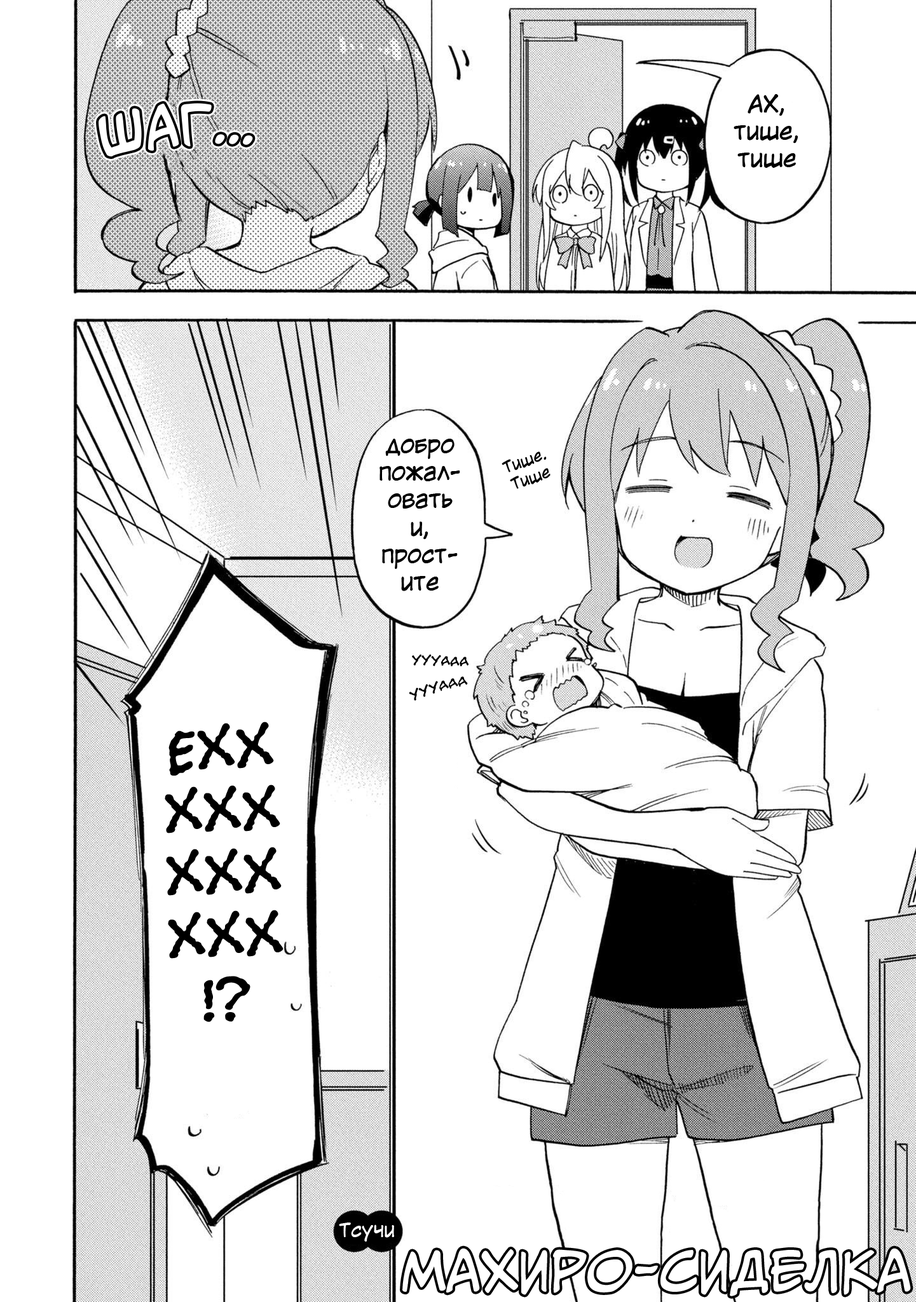
<style>
.page{position:relative;width:916px;height:1302px;background:#ffffff}
.page>*{position:absolute;margin:0}
.t1{font:22.9px "KuraiVoice2";color:#000000}
.t2{font:50.9px "CCMeanwhile";color:#ffffff}
.t3{font:15.3px "KuraiVoice2";color:#000000}
.t4{font:15.3px "el_CCEvilSchemes";color:#000000}
.t5{font:63.3px/62.7px "el_CCEvilSchemes";color:#000000}
.t6{font:19.1px "KuraiVoice2";color:#ffffff}
</style>
<div class="page">
<p class="t1" style="left:734px;top:94px;width:64px;height:74px;text-align:center">АХ,<br>тише,<br>тише</p>
<p class="t2" style="left:99px;top:103px;width:154px;height:54px;rotate:-5deg">ШАг...</p>
<p class="t1" style="left:379px;top:439px;width:81px;height:152px;text-align:center">добро<br>пожал-<br>овать<br>и,<br>прост-<br>ите</p>
<p class="t3" style="left:502px;top:451px;width:48px;height:38px;text-align:center;rotate:-20deg">Тише.<br>Тише</p>
<p class="t4" style="left:412px;top:654px;width:56px;height:12px;rotate:2deg">УУУААА</p>
<p class="t4" style="left:409px;top:676px;width:59px;height:24px;rotate:-16deg">УУУААА</p>
<p class="t5" style="left:165px;top:721px;width:119px;height:301px;text-align:center;rotate:-2deg">ЕХХ<br>ХХХ<br>ХХХ<br>ХХХ<br>!?</p>
<p class="t6" style="left:339px;top:1222px;width:55px;height:19px">Тсучи</p>
<p class="t2" style="left:402px;top:1248px;width:509px;height:48px">махиро-сиделка</p>
</div>
